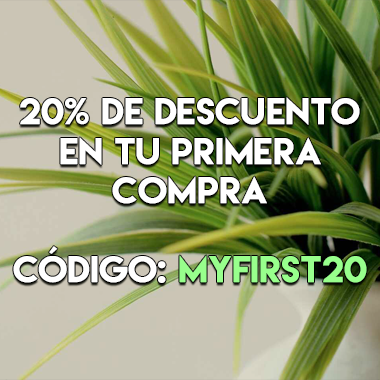
<style>
.page{position:relative;width:380px;height:380px}
.page>*{position:absolute;margin:0}
.t1{font:33px "LemonMilk";color:#ffffff;font-weight:bold;scale:1.05 1}
.t2{font:33px "LemonMilk";color:#98ff8c;font-weight:bold;scale:1.05 1}
</style>
<div class="page">
<p class="t1" style="left:13px;top:97px;width:354px;height:186px;text-align:center">20% de descuento<br>en tu primera<br>compra<br><br>Código: <span class="t2">myFirst20</span></p>
</div>
